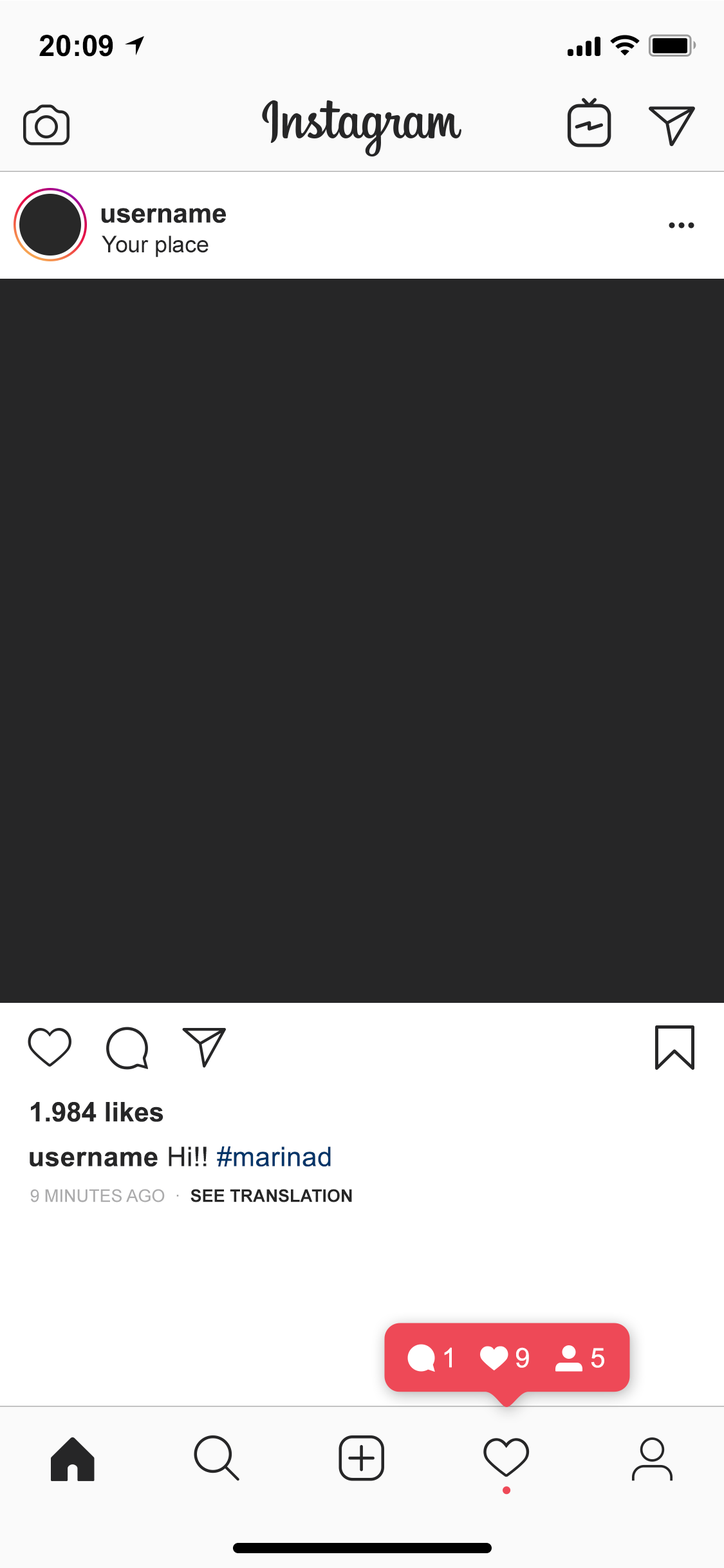
<style>
.page{position:relative;width:724px;height:1568px;background:#262627}
.page>*{position:absolute;margin:0}
.t1{font:29.6px "Arial-BoldMT";color:#000000}
.t2{font:27px "Arial-BoldMT";color:#262627}
.t3{font:23.2px "ArialMT";color:#262627}
.t4{font:27px "Arial-BoldMT";letter-spacing:0.015em;color:#262627}
.t5{font:27px "ArialMT";letter-spacing:0.015em;color:#262627}
.t6{font:27px "ArialMT";letter-spacing:0.015em;color:#003569}
.t7{font:17.4px "Arial-BoldMT";color:#262626}
.t8{font:17.4px "ArialMT";color:#ababac}
.t9{font:17.4px "ArialMT";color:#9a9a9a}
.t10{font:27px "ArialMT";color:#ffffff}
</style>
<div class="page">
<p class="t1" style="left:39px;top:35px;width:74px;height:22px">20:09</p>
<p class="t2" style="left:101px;top:208px;width:125px;height:15px">username</p>
<p class="t3" style="left:102px;top:236px;width:107px;height:21px">Your place</p>
<p class="t2" style="left:31px;top:1102px;width:132px;height:20px">1.984 likes</p>
<p class="t4" style="left:30px;top:1146px;width:301px;height:21px">username<span class="t5"> Hi!! </span><span class="t6">#marinad</span></p>
<p class="t7" style="left:30px;top:1189px;width:322px;height:13px"><span class="t8">9 MINUTES AGO  </span><span class="t9">·  </span>SEE TRANSLATION</p>
<p class="t10" style="left:444px;top:1347px;width:8px;height:21px">1</p>
<p class="t10" style="left:516px;top:1347px;width:13px;height:21px">9</p>
<p class="t10" style="left:592px;top:1348px;width:12px;height:20px">5</p>
</div>
